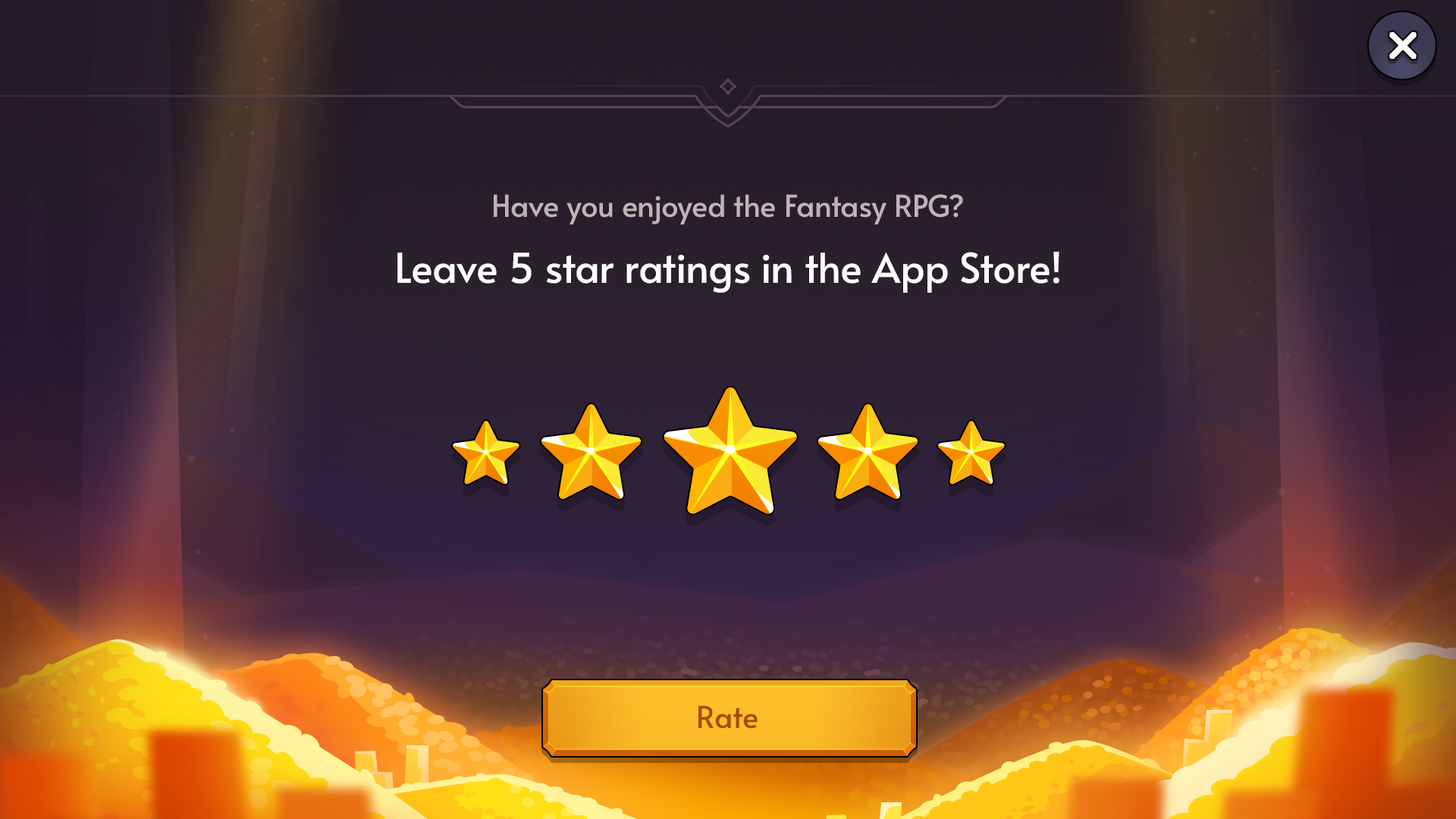
<style>
.page{position:relative;width:1456px;height:819px}
.page>*{position:absolute;margin:0}
.t1{font:30.3px "Alata-Regular";color:#beb5b6}
.t2{font:40.9px "Alata-Regular";color:#ffffff}
.t3{font:30.3px "Alata-Regular";color:#a34c05}
</style>
<div class="page">
<p class="t1" style="left:494px;top:194px;width:469px;height:30px">Have you enjoyed the Fantasy RPG?</p>
<p class="t2" style="left:397px;top:252px;width:662px;height:41px">Leave 5 star ratings in the App Store!</p>
<p class="t3" style="left:698px;top:705px;width:60px;height:24px">Rate</p>
</div>
